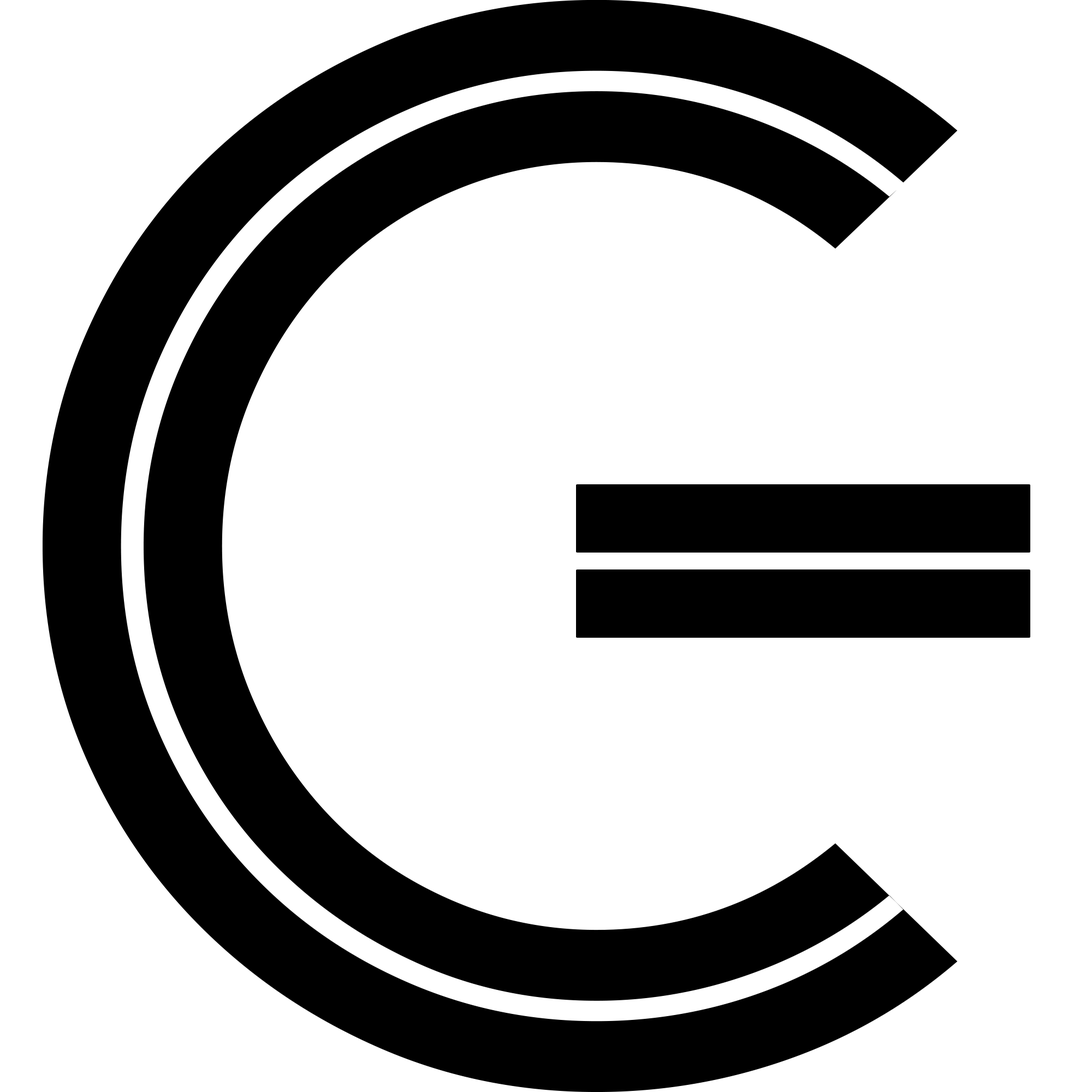
<style>
.page{position:relative;width:1092px;height:1092px;background:#ffffff}
.page>*{position:absolute;margin:0}
.t1{font:1573.6px "Urban-Inline";letter-spacing:0.2em;color:#000000;scale:1.11 1}
</style>
<div class="page">
<p class="t1" style="left:43px;top:0px;width:915px;height:1092px">C</p>
</div>
